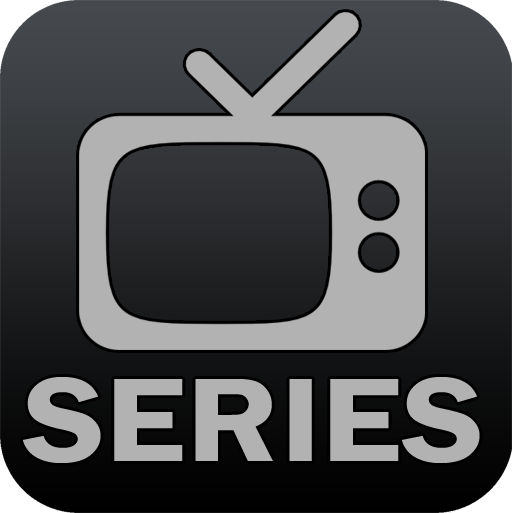
<style>
.page{position:relative;width:512px;height:513px;background:#b2b2b2}
.page>*{position:absolute;margin:0}
.t1{font:122.9px "FranklinGothic-Demi";color:#b2b2b2;scale:1.16 1}
</style>
<div class="page">
<p class="t1" style="left:22px;top:377px;width:458px;height:86px">SERIES</p>
</div>
